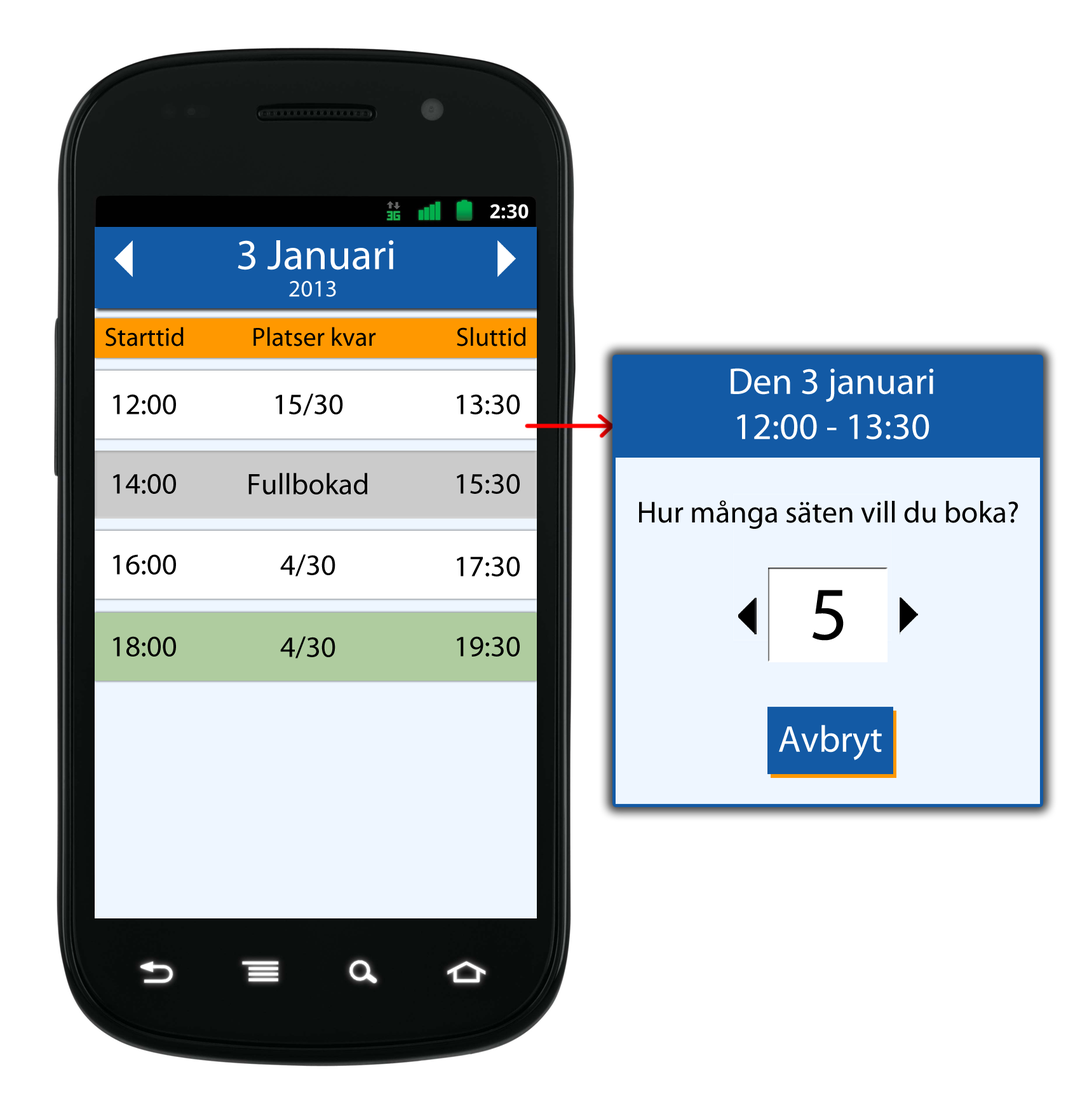
<style>
.page{position:relative;width:1080px;height:1104px;background:#ffffff}
.page>*{position:absolute;margin:0}
.t1{font:43px "MyriadPro-Regular";color:#ffffff}
.t2{font:23.8px "MyriadPro-Regular";color:#ffffff}
.t3{font:26.1px "MyriadPro-Regular";color:#000000}
.t4{font:37.6px "MyriadPro-Regular";color:#ffffff}
.t5{font:29.7px "MyriadPro-Regular";color:#000000}
.t6{font:30.5px "MyriadPro-Regular";color:#000000}
</style>
<div class="page">
<p class="t1" style="left:238px;top:240px;width:156px;height:30px">3 Januari</p>
<p class="t2" style="left:289px;top:281px;width:47px;height:16px">2013</p>
<p class="t3" style="left:105px;top:327px;width:79px;height:19px">Starttid</p>
<p class="t3" style="left:254px;top:327px;width:122px;height:19px">Platser kvar</p>
<p class="t3" style="left:457px;top:327px;width:69px;height:19px">Sluttid</p>
<p class="t4" style="left:731px;top:368px;width:203px;height:72px;text-align:center">Den 3 januari<br>12:00 - 13:30</p>
<p class="t5" style="left:113px;top:394px;width:63px;height:20px">12:00</p>
<p class="t5" style="left:275px;top:393px;width:68px;height:23px">15/30</p>
<p class="t5" style="left:457px;top:394px;width:63px;height:20px">13:30</p>
<p class="t5" style="left:113px;top:473px;width:63px;height:21px">14:00</p>
<p class="t5" style="left:248px;top:473px;width:120px;height:21px">Fullbokad</p>
<p class="t5" style="left:457px;top:473px;width:63px;height:21px">15:30</p>
<p class="t6" style="left:639px;top:500px;width:380px;height:29px">Hur många säten vill du boka?</p>
<p class="t5" style="left:113px;top:554px;width:63px;height:20px">16:00</p>
<p class="t5" style="left:280px;top:554px;width:56px;height:22px">4/30</p>
<p class="t5" style="left:457px;top:556px;width:63px;height:20px">17:30</p>
<p class="t5" style="left:113px;top:636px;width:63px;height:20px">18:00</p>
<p class="t5" style="left:280px;top:636px;width:56px;height:22px">4/30</p>
<p class="t5" style="left:457px;top:636px;width:63px;height:20px">19:30</p>
</div>
